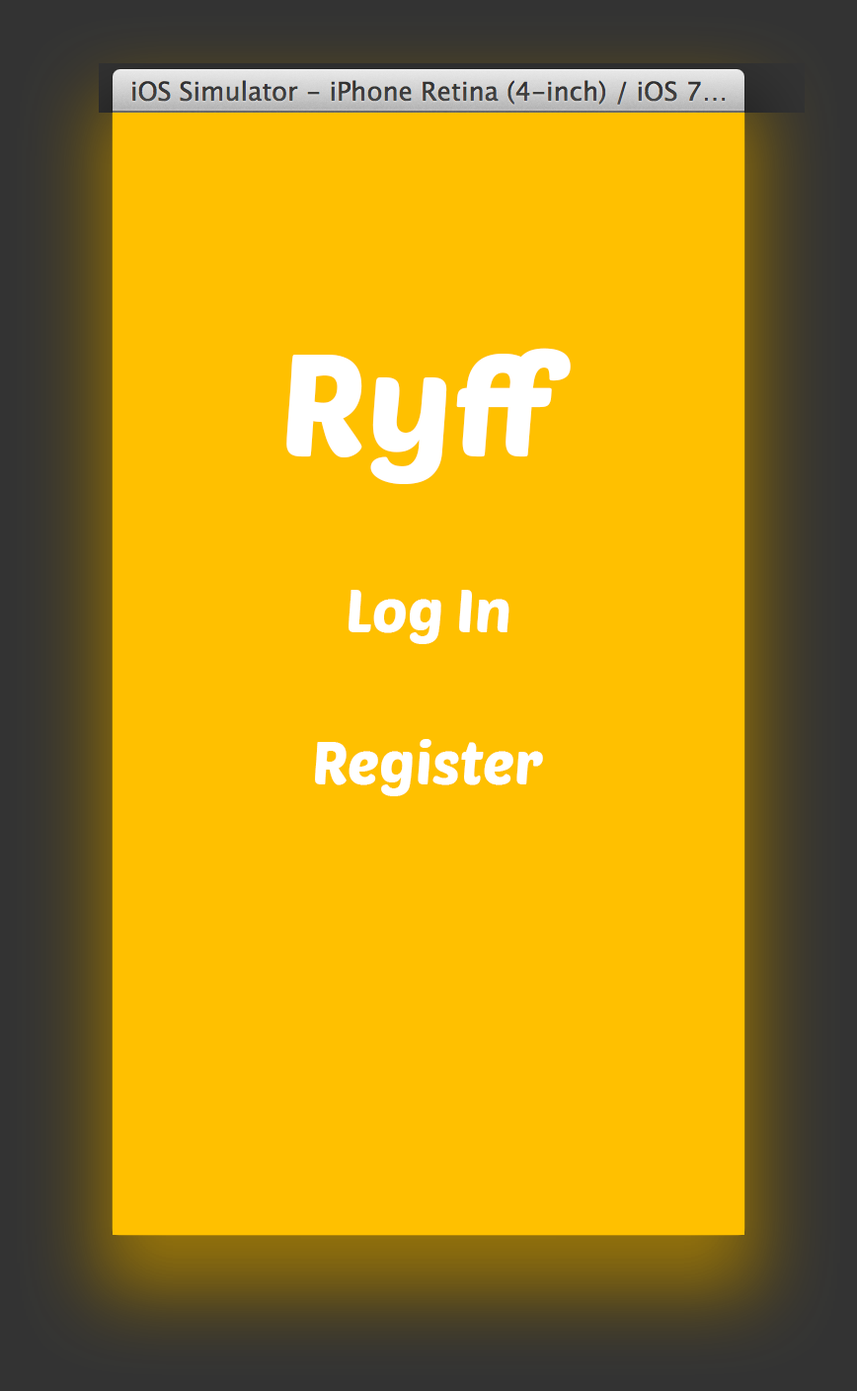
<style>
.page{position:relative;width:857px;height:1391px;background:#ffc000}
.page>*{position:absolute;margin:0}
.t1{font:142.2px "PoetsenOne-Regular";color:#ffffff}
.t2{font:59.3px "PoetsenOne-Regular";color:#ffffff}
</style>
<div class="page">
<p class="t1" style="left:286px;top:348px;width:285px;height:136px">Ryff</p>
<p class="t2" style="left:349px;top:590px;width:161px;height:54px">Log In</p>
<p class="t2" style="left:315px;top:739px;width:228px;height:57px">Register</p>
</div>
